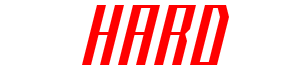
<style>
.page{position:relative;width:308px;height:67px;background:#ffffff}
.page>*{position:absolute;margin:0}
.t1{font:96px "PlatformEight";color:#ff0000}
</style>
<div class="page">
<p class="t1" style="left:82px;top:5px;width:147px;height:60px">HARD</p>
</div>
